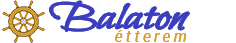
<style>
.page{position:relative;width:236px;height:43px;background:#ffffff}
.page>*{position:absolute;margin:0}
.t1{font:38px "BilboSwashCaps-Regular";color:#3b3fbd;scale:1.43 1}
.t2{font:16px "Roboto-Italic";letter-spacing:0.2em;color:#d79f2e}
</style>
<div class="page">
<p class="t1" style="left:50px;top:1px;width:139px;height:30px">Balaton</p>
<p class="t2" style="left:115px;top:30px;width:72px;height:12px">étterem</p>
</div>
